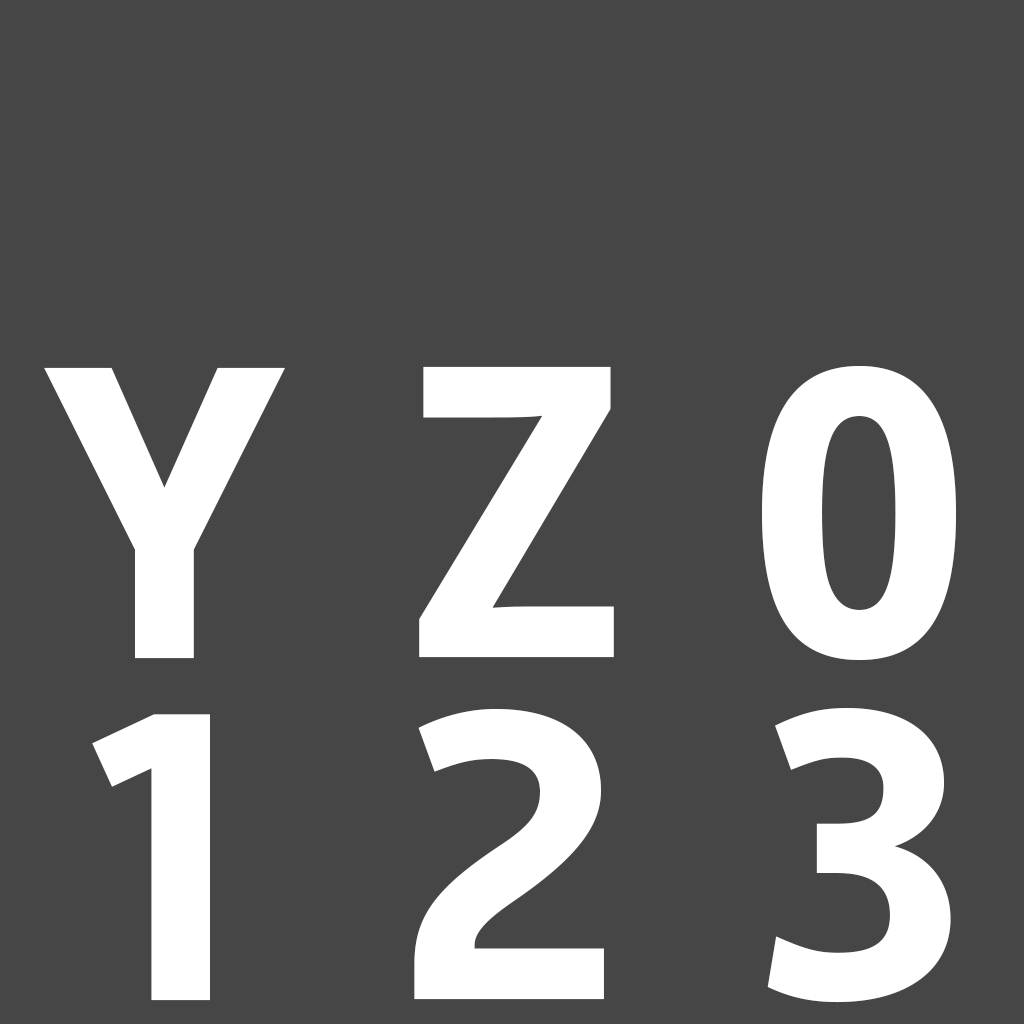
<style>
.page{position:relative;width:1024px;height:1024px;background:#464646}
.page>*{position:absolute;margin:0}
.t1{font:420px "SemikolonPlus-Bold";color:#ffffff}
</style>
<div class="page">
<p class="t1" style="left:419px;top:366px;width:195px;height:292px">Z</p>
<p class="t1" style="left:762px;top:366px;width:194px;height:294px">0</p>
<p class="t1" style="left:44px;top:367px;width:241px;height:292px">Y</p>
<p class="t1" style="left:414px;top:709px;width:190px;height:291px">2</p>
<p class="t1" style="left:767px;top:708px;width:184px;height:295px">3</p>
<p class="t1" style="left:92px;top:714px;width:118px;height:287px">1</p>
</div>
